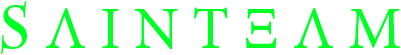
<style>
.page{position:relative;width:401px;height:55px;background:#ffffff}
.page>*{position:absolute;margin:0}
.t1{font:60px "MinionPro-Regular";color:#00ff24}
.t2{font:60px "CharlemagneStd-Bold";color:#00ff24}
</style>
<div class="page">
<p class="t1" style="left:1px;top:1px;width:399px;height:53px"><span class="t2">S </span>Λ I N T Ξ Λ M</p>
</div>
